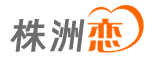
<style>
.page{position:relative;width:162px;height:60px;background:#ffffff}
.page>*{position:absolute;margin:0}
.t1{font:37.5px "DingTalk-JinBuTi";color:#6c6c6c;font-weight:bold}
</style>
<div class="page">
<p class="t1" style="left:10px;top:19px;width:75px;height:33px">株洲</p>
</div>
